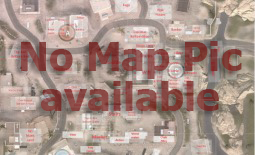
<style>
.page{position:relative;width:255px;height:155px}
.page>*{position:absolute;margin:0}
.t1{font:40px/40px "Tahoma-Bold";color:#85423e}
</style>
<div class="page">
<p class="t1" style="left:21px;top:41px;width:221px;height:70px;text-align:center">No Map Pic<br>available</p>
</div>
